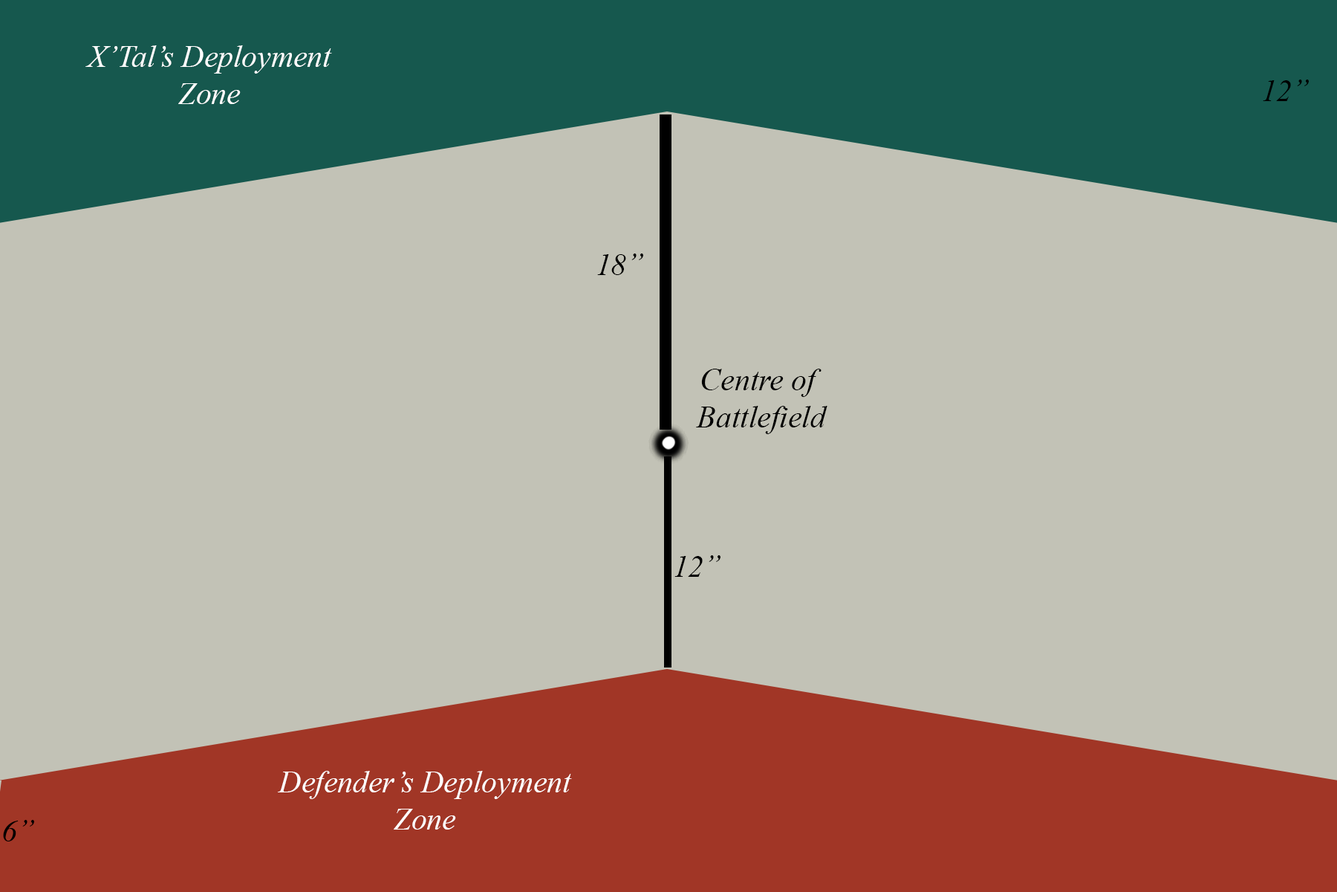
<style>
.page{position:relative;width:1337px;height:892px;background:#c2c2b6}
.page>*{position:absolute;margin:0}
.t1{font:31px "TimesNewRomanPS-ItalicMT";color:#ffffff}
.t2{font:31px "TimesNewRomanPS-ItalicMT";color:#000000}
</style>
<div class="page">
<p class="t1" style="left:85px;top:45px;width:247px;height:59px;text-align:center">X’Tal’s Deployment<br>Zone</p>
<p class="t2" style="left:1263px;top:80px;width:46px;height:21px">12”</p>
<p class="t2" style="left:597px;top:253px;width:46px;height:22px">18”</p>
<p class="t2" style="left:696px;top:369px;width:132px;height:65px;text-align:center">Centre of <br>Battlefield</p>
<p class="t2" style="left:675px;top:555px;width:46px;height:22px">12”</p>
<p class="t1" style="left:278px;top:770px;width:294px;height:59px;text-align:center">Defender’s Deployment<br>Zone</p>
<p class="t2" style="left:3px;top:820px;width:31px;height:21px">6”</p>
</div>
